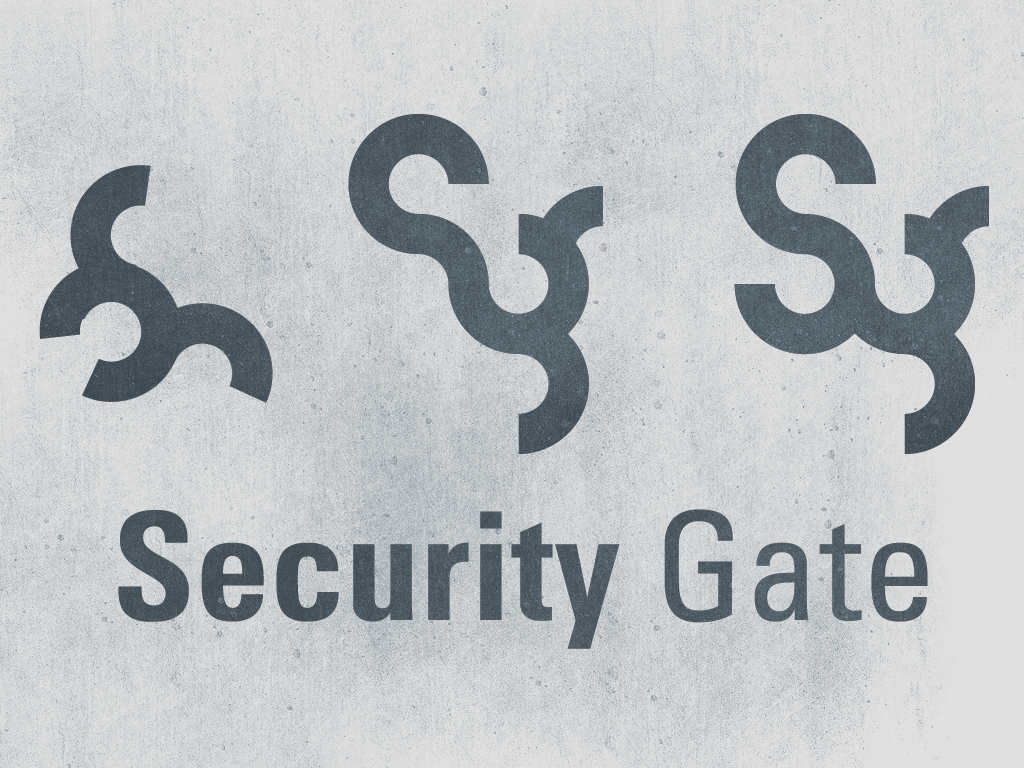
<style>
.page{position:relative;width:1024px;height:768px}
.page>*{position:absolute;margin:0}
.t1{font:150px "UniversLTStd-BoldCn";color:#3f4950}
.t2{font:150px "UniversLTStd-Cn";color:#3f4950}
</style>
<div class="page">
<p class="t1" style="left:118px;top:509px;width:810px;height:140px">Security <span class="t2">Gate</span></p>
</div>
